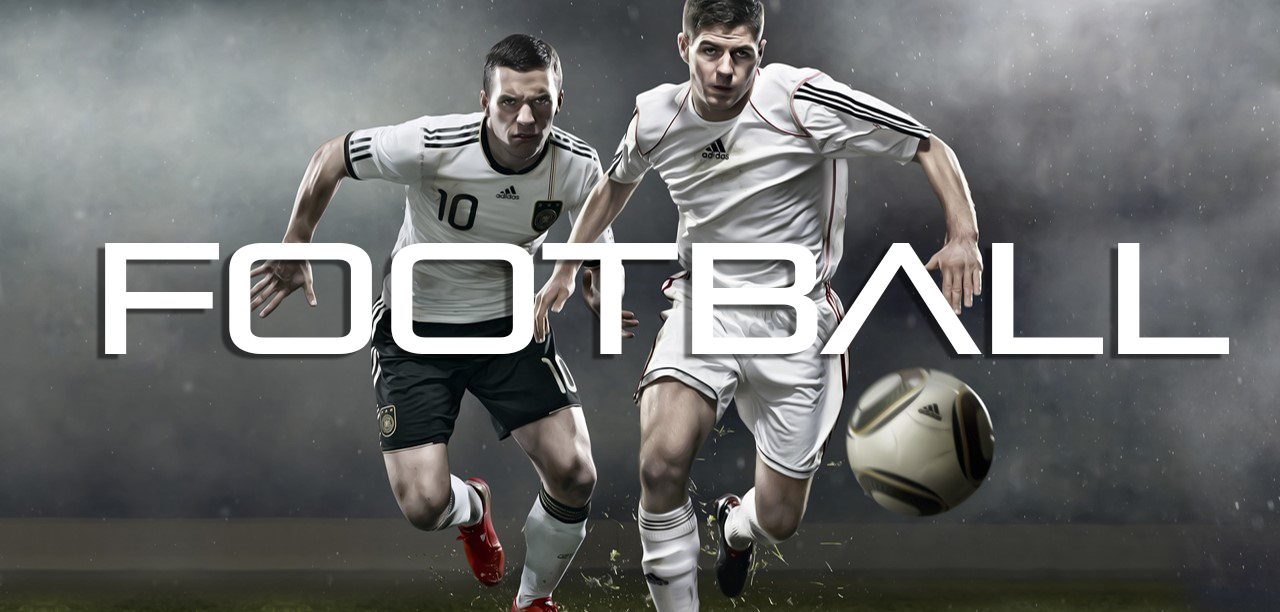
<style>
.page{position:relative;width:1280px;height:612px}
.page>*{position:absolute;margin:0}
.t1{font:157.3px "PirulenRg-Regular";color:#ffffff}
</style>
<div class="page">
<p class="t1" style="left:105px;top:243px;width:1124px;height:111px">football</p>
</div>
